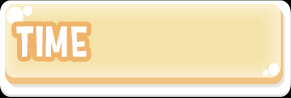
<style>
.page{position:relative;width:291px;height:98px;background:#f5e3a9}
.page>*{position:absolute;margin:0}
.t1{font:41.7px "Splat2K";letter-spacing:0.01em;color:#ffffff}
</style>
<div class="page">
<p class="t1" style="left:16px;top:26px;width:71px;height:31px">TIME</p>
</div>
